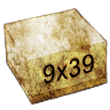
<style>
.page{position:relative;width:110px;height:110px;background:#ffffff}
.page>*{position:absolute;margin:0}
.t1{font:12px "Arial";letter-spacing:0.025em;color:#000000;scale:0.95 1}
</style>
<div class="page">
<p class="t1" style="left:43px;top:54px;width:51px;height:30px;rotate:-13deg">9x39</p>
</div>
